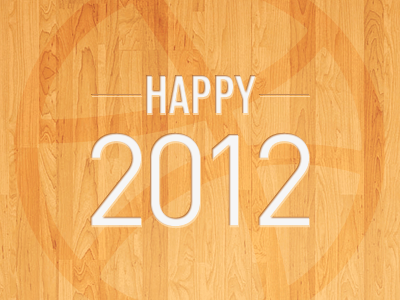
<style>
.page{position:relative;width:400px;height:300px}
.page>*{position:absolute;margin:0}
.t1{font:50px "BureauGrotesque-ThreeThree";color:#f6f6f6}
.t2{font:127.2px "DIN-Regular";letter-spacing:-0.1em;color:#f6f6f6}
.t3{font:127.2px "DIN-Regular";letter-spacing:-0.05em;color:#f6f6f6}
</style>
<div class="page">
<p class="t1" style="left:146px;top:75px;width:110px;height:38px">HAPPY</p>
<p class="t2" style="left:90px;top:132px;width:219px;height:95px"><span class="t3">2</span>01<span class="t3">2</span></p>
</div>
